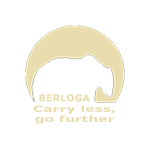
<style>
.page{position:relative;width:150px;height:150px;background:#ffffff}
.page>*{position:absolute;margin:0}
.t1{font:8.8px "Verdana-Bold";color:#e9ddaf;scale:1.59 1}
</style>
<div class="page">
<p class="t1" style="left:33px;top:105px;width:83px;height:19px;text-align:center">Carry less,<br>go further</p>
</div>
